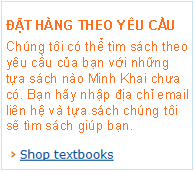
<style>
.page{position:relative;width:195px;height:172px;background:#ffffff}
.page>*{position:absolute;margin:0}
.t1{font:13.2px "Arial-BoldMT";color:#ff6f20}
.t2{font:13.2px "ArialMT";color:#ff6f20}
</style>
<div class="page">
<p class="t1" style="left:6px;top:17px;width:168px;height:16px">ĐẶT HÀNG THEO YÊU CẦU</p>
<p class="t2" style="left:6px;top:38px;width:182px;height:95px">Chúng tôi có thể tìm sách theo <br>yêu cầu của bạn với những <br>tựa sách nào Minh Khai chưa <br>có. Bạn hãy nhập địa chỉ email<br>liên hệ và tựa sách chúng tôi <br>sẽ tìm sách giúp bạn.</p>
</div>
